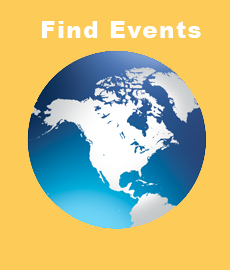
<style>
.page{position:relative;width:230px;height:270px;background:#fdcb58}
.page>*{position:absolute;margin:0}
.t1{font:23px "Arial-Black";letter-spacing:0.065em;color:#ffffff}
</style>
<div class="page">
<p class="t1" style="left:42px;top:21px;width:159px;height:17px">Find Events</p>
</div>
